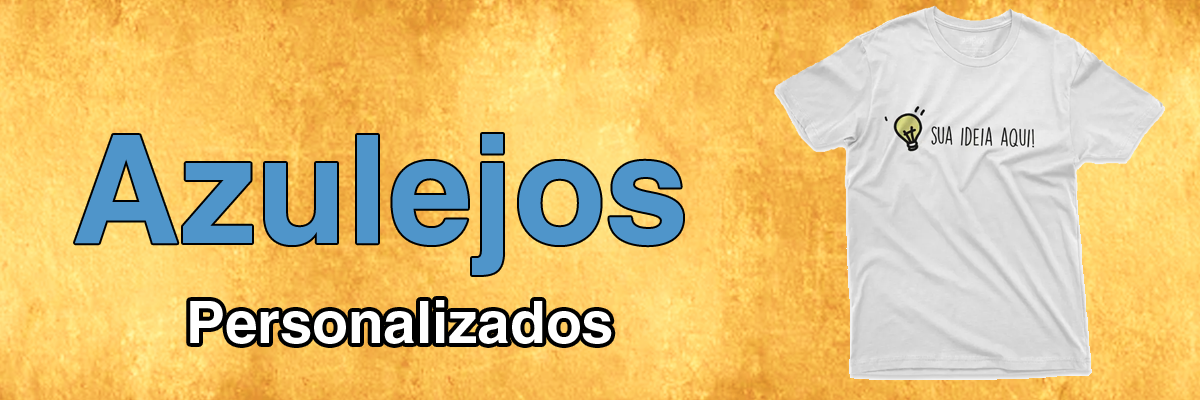
<style>
.page{position:relative;width:1200px;height:400px}
.page>*{position:absolute;margin:0}
.t1{font:150px "Helvetica-Bold";color:#4f95ca}
.t2{font:58.3px "Helvetica-Bold";color:#ffffff}
</style>
<div class="page">
<p class="t1" style="left:75px;top:134px;width:608px;height:141px">Azulejos</p>
<p class="t2" style="left:190px;top:300px;width:422px;height:44px">Personalizados</p>
</div>
